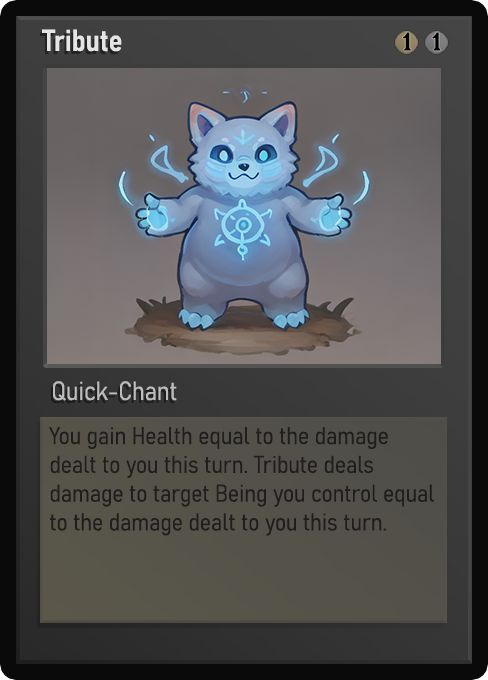
<style>
.page{position:relative;width:488px;height:680px}
.page>*{position:absolute;margin:0}
.t1{font:30px "Bahnschrift-SemiBoldSemiCondensed";color:#f2f2f2;font-weight:bold}
.t2{font:25px "WTRRoycroft";color:#000000;font-weight:bold;scale:1.09 1}
.t3{font:26px "Bahnschrift-LightSemiCondensed";color:#c8c8c8;font-weight:bold}
.t4{font:24px "Bahnschrift-LightSemiCondensed";color:#1e1e1e;font-weight:bold}
</style>
<div class="page">
<p class="t1" style="left:42px;top:29px;width:80px;height:23px;opacity:0.9">Tribute</p>
<p class="t2" style="left:403px;top:32px;width:8px;height:19px">1</p>
<p class="t2" style="left:432px;top:32px;width:9px;height:19px">1</p>
<p class="t3" style="left:53px;top:381px;width:124px;height:20px;opacity:0.9">Quick-Chant</p>
<p class="t4" style="left:49px;top:427px;width:385px;height:109px">You gain Health equal to the damage dealt to you this turn. Tribute deals damage to target Being you control equal to the damage dealt to you this turn.</p>
</div>
